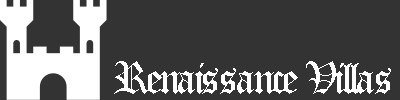
<style>
.page{position:relative;width:400px;height:100px;background:#333333}
.page>*{position:absolute;margin:0}
.t1{font:44px "OldEnglishTextMT";letter-spacing:-0.06em;color:#ffffff}
</style>
<div class="page">
<p class="t1" style="left:114px;top:61px;width:277px;height:33px">Renaissance Villas</p>
</div>
